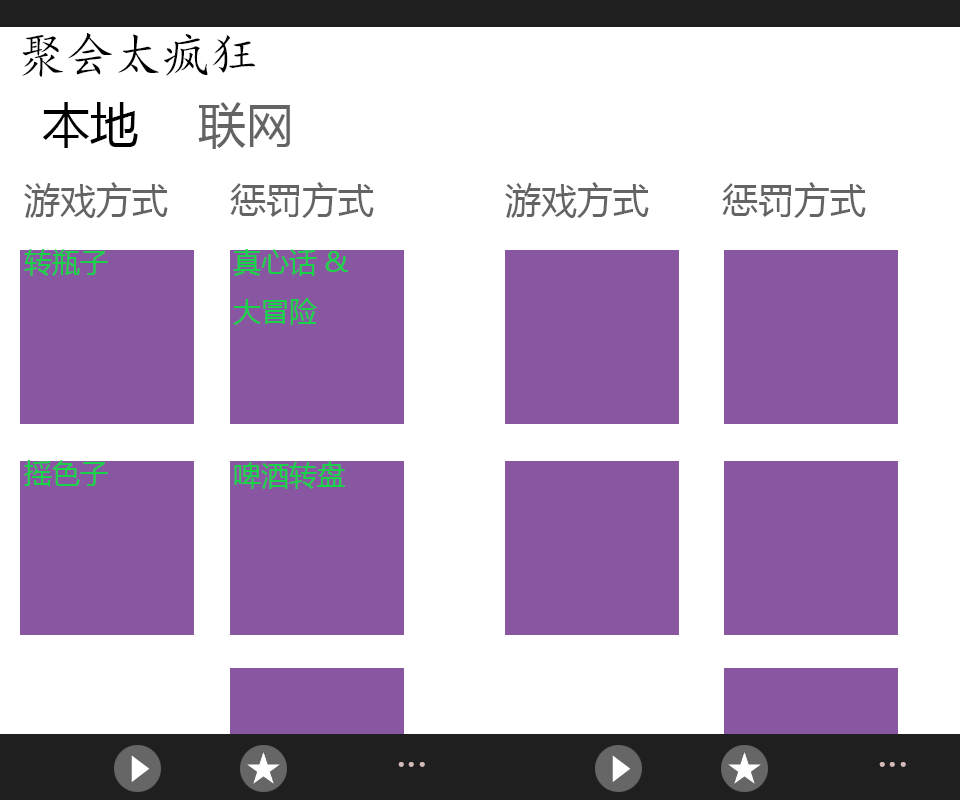
<style>
.page{position:relative;width:960px;height:800px;background:#ffffff}
.page>*{position:absolute;margin:0}
.t1{font:48px "KaiTi";color:#000000}
.t2{font:48px "MicrosoftYaHei";color:#000000}
.t3{font:48px "MicrosoftYaHei";color:#646464}
.t4{font:36px "MicrosoftYaHei";color:#646464}
.t5{font:28px "MicrosoftYaHei";color:#18d348}
.t6{font:48px "STFangsong";color:#d5baba}
</style>
<div class="page">
<p class="t1" style="left:22px;top:33px;width:233px;height:44px">聚会太疯狂</p>
<p class="t2" style="left:42px;top:102px;width:96px;height:46px">本地</p>
<p class="t3" style="left:198px;top:102px;width:92px;height:47px">联网</p>
<p class="t4" style="left:24px;top:182px;width:144px;height:36px">游戏方式</p>
<p class="t4" style="left:230px;top:182px;width:144px;height:36px">惩罚方式</p>
<p class="t4" style="left:505px;top:182px;width:144px;height:36px">游戏方式</p>
<p class="t4" style="left:722px;top:182px;width:144px;height:36px">惩罚方式</p>
<p class="t5" style="left:24px;top:249px;width:84px;height:27px">转瓶子</p>
<p class="t5" style="left:233px;top:249px;width:115px;height:76px">真心话&amp;<br>大冒险</p>
<p class="t5" style="left:24px;top:460px;width:84px;height:26px">摇色子</p>
<p class="t5" style="left:234px;top:461px;width:111px;height:28px">啤酒转盘</p>
<p class="t6" style="left:398px;top:762px;width:27px;height:5px">...</p>
<p class="t6" style="left:879px;top:762px;width:27px;height:5px">...</p>
</div>
